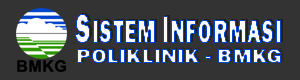
<style>
.page{position:relative;width:300px;height:80px;background:#333333}
.page>*{position:absolute;margin:0}
.t1{font:34px "FranklinGothic-Heavy";scale:0.65 1}
.t2{font:42.8px "FranklinGothic-Heavy";scale:0.65 1}
.t3{font:39.8px "FranklinGothic-Heavy";scale:0.65 1}
.t4{font:21px "FranklinGothic-Heavy";scale:1.09 1}
</style>
<div class="page">
<p class="t1" style="left:75px;top:14px;width:206px;height:29px"><span class="t2">S</span>ISTEM <span class="t3">I</span>NFORMASI</p>
<p class="t4" style="left:77px;top:49px;width:204px;height:14px">POLIKLINIK - BMKG</p>
</div>
